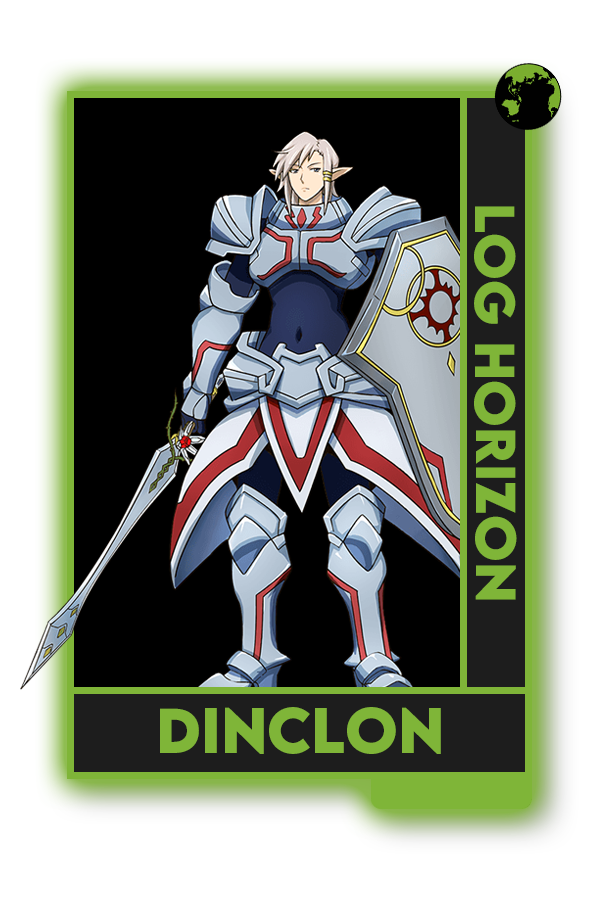
<style>
.page{position:relative;width:600px;height:900px;background:#ffffff}
.page>*{position:absolute;margin:0}
.t1{font:50px "LEMONMILK-Bold";color:#7fad41}
.t2{font:56.7px "LEMONMILK-Bold";color:#7fad41}
</style>
<div class="page">
<p class="t1" style="left:474px;top:206px;width:43px;height:394px;rotate:90deg">Log Horizon</p>
<p class="t2" style="left:160px;top:707px;width:281px;height:47px">Dinclon</p>
</div>
